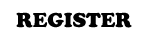
<style>
.page{position:relative;width:150px;height:40px;background:#ffffff}
.page>*{position:absolute;margin:0}
.t1{font:20px "CooperBlackStd";color:#010101}
</style>
<div class="page">
<p class="t1" style="left:16px;top:12px;width:116px;height:16px">REGISTER</p>
</div>
